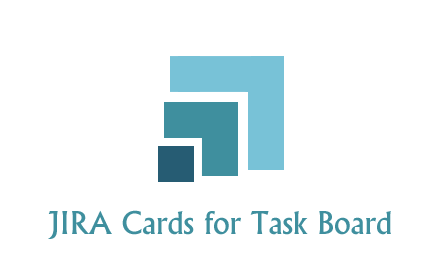
<style>
.page{position:relative;width:440px;height:280px;background:#ffffff}
.page>*{position:absolute;margin:0}
.t1{font:30px "Albertus-Medium";color:#3f8f9e}
</style>
<div class="page">
<p class="t1" style="left:48px;top:210px;width:343px;height:29px">JIRA Cards for Task Board</p>
</div>
